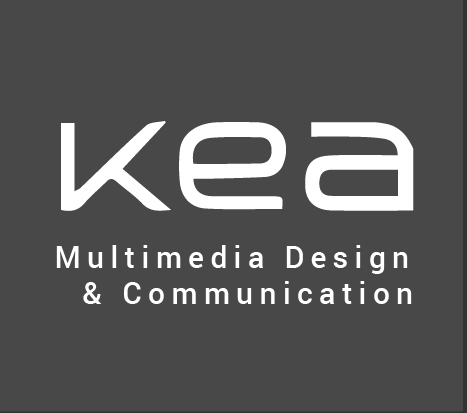
<style>
.page{position:relative;width:467px;height:413px;background:#484848}
.page>*{position:absolute;margin:0}
.t1{font:29.7px "Roboto-Medium";letter-spacing:0.219em;color:#ffffff}
.t2{font:29.7px "Roboto-Medium";letter-spacing:0.22em;color:#ffffff}
.t3{font:29.7px "Roboto-Medium";color:#ffffff}
.t4{font:30px "Roboto-Medium";letter-spacing:0.219em;color:#ffffff}
</style>
<div class="page">
<p class="t1" style="left:56px;top:245px;width:352px;height:29px"><span class="t2">M</span>ul<span class="t2">t</span>i<span class="t2">m</span>edi<span class="t2">a</span> Desig<span class="t3">n</span></p>
<p class="t1" style="left:124px;top:281px;width:288px;height:23px"><span class="t2">C</span>o<span class="t2">mm</span>uni<span class="t2">cat</span>io<span class="t3">n</span></p>
<p class="t4" style="left:83px;top:282px;width:19px;height:22px">&amp;</p>
</div>
